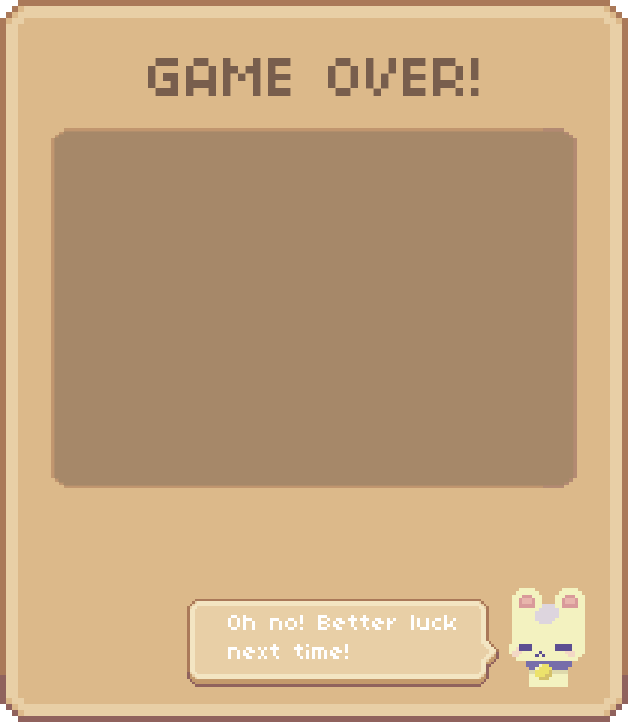
<style>
.page{position:relative;width:628px;height:722px;background:#a68869}
.page>*{position:absolute;margin:0}
.t1{font:60px "04b03";color:#785e4d}
.t2{font:24px "04b03";color:#ffffff}
</style>
<div class="page">
<p class="t1" style="left:148px;top:58px;width:331px;height:38px">GAME OVER!</p>
<p class="t2" style="left:228px;top:615px;width:228px;height:44px">Oh no! Better luck<br>next time!</p>
</div>
